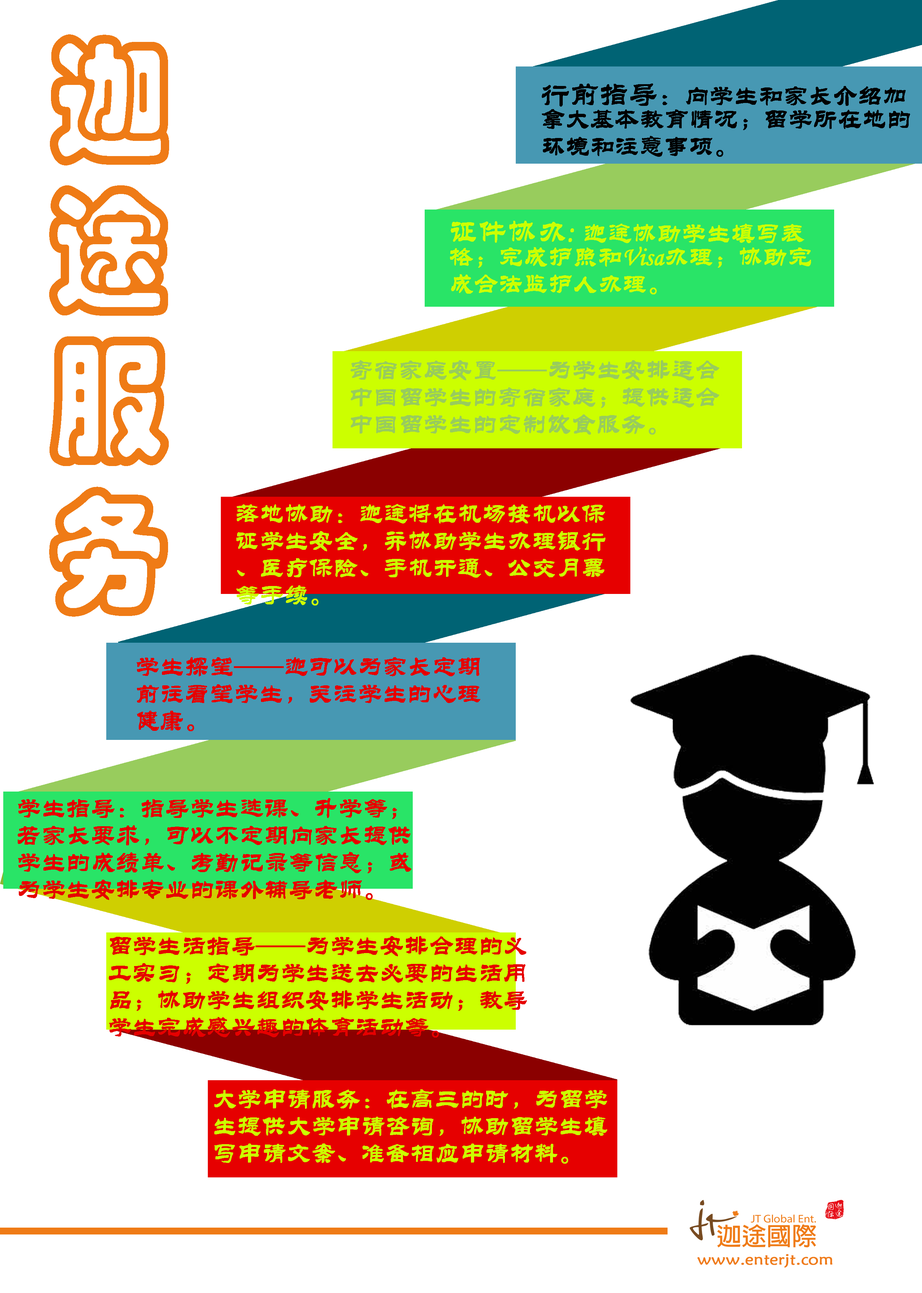
<style>
.page{position:relative;width:922px;height:1293px;background:#ffffff}
.page>*{position:absolute;margin:0}
.t1{font:132.5px/150.6px "STCaiyun";color:#ef7b16;font-weight:bold;scale:0.91 1}
.t2{font:26.5px/27.1px "STLiti";color:#000000;font-weight:bold;scale:0.91 1}
.t3{font:31.5px/27.1px "STLiti";color:#000000;font-weight:bold;scale:0.91 1}
.t4{font:28.2px/27.1px "STLiti";color:#000000;font-weight:bold;scale:0.91 1}
.t5{font:26.5px/27.1px "STLiti";color:#ccff00;font-weight:bold;scale:0.91 1}
.t6{font:31.5px/27.1px "STLiti";color:#ccff00;font-weight:bold;scale:0.91 1}
.t7{font:26.5px/27.1px "STLiti";color:#98cc5d;font-weight:bold;scale:0.91 1}
.t8{font:26.5px/27.1px "STLiti";color:#e60000;font-weight:bold;scale:0.91 1}
</style>
<div class="page">
<p class="t1" style="left:49px;top:34px;width:120px;height:583px">迦<br>途<br>服<br>务</p>
<p class="t2" style="left:542px;top:83px;width:368px;height:74px"><span class="t3">行前指导</span><span class="t4">：</span>向学生和家长介绍加拿大基本教育情况；留学所在地的环境和注意事项。</p>
<p class="t5" style="left:450px;top:221px;width:361px;height:74px"><span class="t6">证件协办: </span>迦途协助学生填写表格；完成护照和Visa办理；协助完成合法监护人办理。</p>
<p class="t7" style="left:351px;top:360px;width:368px;height:75px">寄宿家庭安置——为学生安排适合中国留学生的寄宿家庭；提供适合中国留学生的定制饮食服务。</p>
<p class="t5" style="left:236px;top:504px;width:369px;height:102px">落地协助：迦途将在机场接机以保证学生安全，并协助学生办理银行、医疗保险、手机开通、公交月票等手续。</p>
<p class="t8" style="left:137px;top:657px;width:343px;height:74px">学生探望——迦可以为家长定期前往看望学生，关注学生的心理健康。</p>
<p class="t8" style="left:18px;top:798px;width:393px;height:102px">学生指导：指导学生选课、升学等；若家长要求，可以不定期向家长提供学生的成绩单、考勤记录等信息；或为学生安排专业的课外辅导老师。</p>
<p class="t8" style="left:109px;top:936px;width:418px;height:102px">留学生活指导——为学生安排合理的义工实习；定期为学生送去必要的生活用品；协助学生组织安排学生活动；教导学生完成感兴趣的体育活动等。</p>
<p class="t5" style="left:214px;top:1090px;width:393px;height:74px">大学申请服务：在高三的时，为留学生提供大学申请咨询，协助留学生填写申请文案、准备相应申请材料。</p>
</div>
